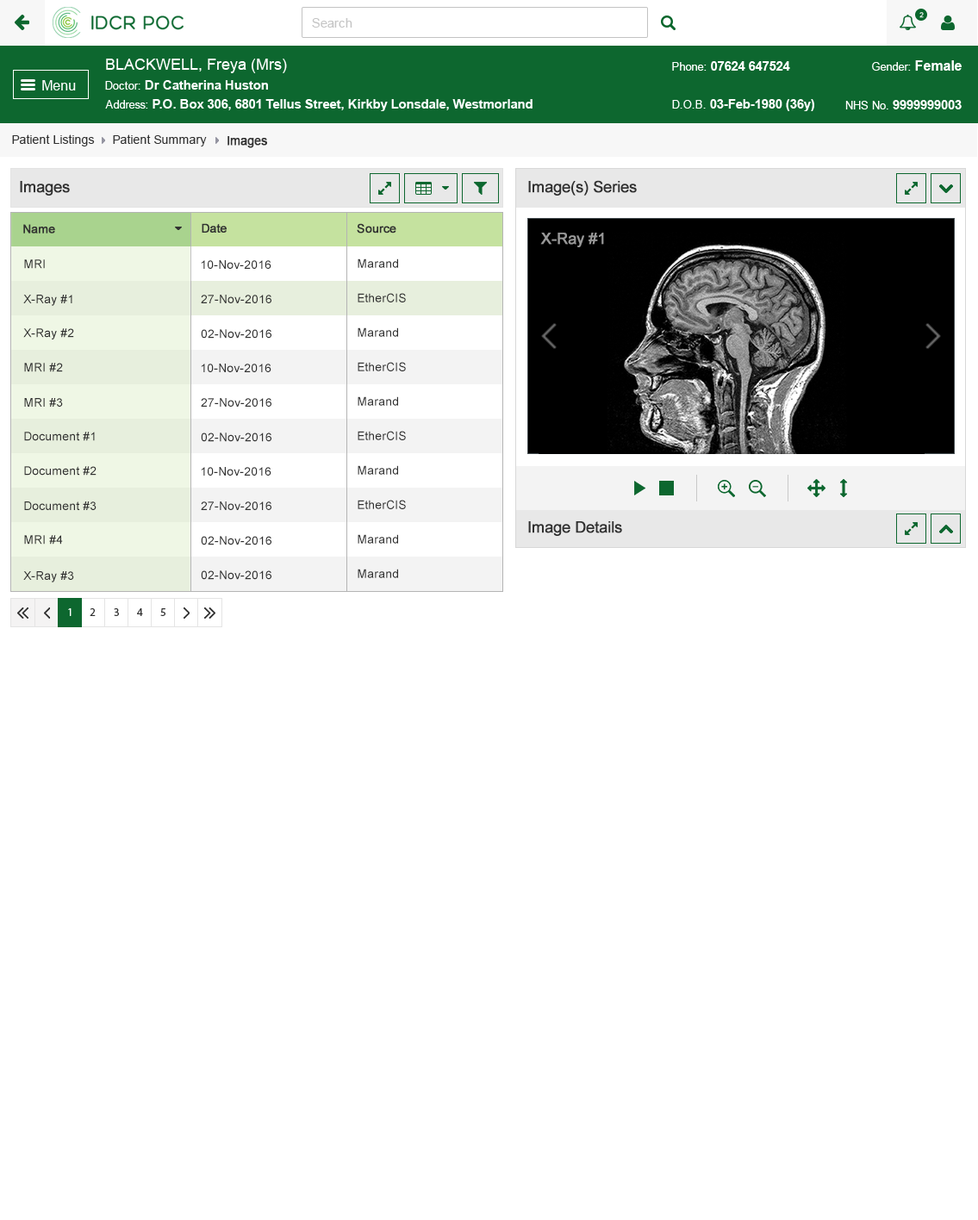
<style>
.page{position:relative;width:978px;height:1220px;background:#ffffff}
.page>*{position:absolute;margin:0}
.t1{font:12.1px "ArialMT";color:#313131}
.t2{font:12.1px "ArialMT";color:#313131;font-weight:bold}
.t3{font:15.5px "ArialMT";color:#303030;font-weight:bold}
.t4{font:12.1px "ArialMT";color:#303030;font-weight:bold}
.t5{font:15.5px "ArialMT";color:#989898;font-weight:bold}
.t6{font:12.1px "ArialMT";color:#303030}
</style>
<div class="page">
<p class="t1" style="left:12px;top:134px;width:83px;height:12px">Patient Listings</p>
<p class="t1" style="left:113px;top:134px;width:94px;height:12px">Patient Summary</p>
<p class="t2" style="left:227px;top:136px;width:40px;height:12px">Images</p>
<p class="t3" style="left:20px;top:181px;width:50px;height:15px">Images</p>
<p class="t3" style="left:528px;top:180px;width:109px;height:16px">Image(s) Series</p>
<p class="t4" style="left:23px;top:224px;width:32px;height:9px">Name</p>
<p class="t4" style="left:202px;top:223px;width:25px;height:10px">Date</p>
<p class="t4" style="left:357px;top:223px;width:39px;height:10px">Source</p>
<p class="t5" style="left:540px;top:233px;width:64px;height:14px">X-Ray #1</p>
<p class="t6" style="left:24px;top:259px;width:21px;height:10px">MRI</p>
<p class="t6" style="left:201px;top:260px;width:70px;height:9px">10-Nov-2016</p>
<p class="t6" style="left:357px;top:258px;width:41px;height:10px">Marand</p>
<p class="t6" style="left:357px;top:293px;width:49px;height:9px">EtherCIS</p>
<p class="t6" style="left:23px;top:295px;width:49px;height:11px">X-Ray #1</p>
<p class="t6" style="left:201px;top:295px;width:70px;height:8px">27-Nov-2016</p>
<p class="t6" style="left:23px;top:328px;width:51px;height:11px">X-Ray #2</p>
<p class="t6" style="left:201px;top:329px;width:70px;height:10px">02-Nov-2016</p>
<p class="t6" style="left:357px;top:327px;width:41px;height:10px">Marand</p>
<p class="t6" style="left:24px;top:363px;width:39px;height:9px">MRI #2</p>
<p class="t6" style="left:201px;top:363px;width:70px;height:9px">10-Nov-2016</p>
<p class="t6" style="left:357px;top:362px;width:49px;height:9px">EtherCIS</p>
<p class="t6" style="left:24px;top:398px;width:39px;height:9px">MRI #3</p>
<p class="t6" style="left:201px;top:398px;width:70px;height:9px">27-Nov-2016</p>
<p class="t6" style="left:357px;top:396px;width:41px;height:10px">Marand</p>
<p class="t6" style="left:24px;top:432px;width:71px;height:9px">Document #1</p>
<p class="t6" style="left:201px;top:432px;width:70px;height:10px">02-Nov-2016</p>
<p class="t6" style="left:357px;top:431px;width:49px;height:9px">EtherCIS</p>
<p class="t6" style="left:24px;top:466px;width:72px;height:9px">Document #2</p>
<p class="t6" style="left:201px;top:467px;width:70px;height:8px">10-Nov-2016</p>
<p class="t6" style="left:357px;top:465px;width:41px;height:10px">Marand</p>
<p class="t6" style="left:24px;top:501px;width:72px;height:9px">Document #3</p>
<p class="t6" style="left:201px;top:501px;width:70px;height:9px">27-Nov-2016</p>
<p class="t6" style="left:357px;top:500px;width:49px;height:9px">EtherCIS</p>
<p class="t3" style="left:528px;top:521px;width:94px;height:15px">Image Details</p>
<p class="t6" style="left:24px;top:535px;width:39px;height:9px">MRI #4</p>
<p class="t6" style="left:201px;top:536px;width:70px;height:9px">02-Nov-2016</p>
<p class="t6" style="left:357px;top:534px;width:41px;height:10px">Marand</p>
<p class="t6" style="left:357px;top:569px;width:41px;height:9px">Marand</p>
<p class="t6" style="left:23px;top:571px;width:51px;height:11px">X-Ray #3</p>
<p class="t6" style="left:201px;top:570px;width:70px;height:10px">02-Nov-2016</p>
</div>
